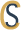
<style>
.page{position:relative;width:21px;height:30px;background:#ffffff}
.page>*{position:absolute;margin:0}
.t1{font:36.4px "Thonburi";color:#d6ad5c;scale:0.96 1}
.t2{font:30.4px "Thonburi";color:#2c3e50;scale:0.83 1}
</style>
<div class="page">
<p class="t1" style="left:0px;top:0px;width:21px;height:30px;rotate:-1deg">C</p>
<p class="t2" style="left:5px;top:3px;width:14px;height:25px;rotate:-1deg">S</p>
</div>
